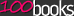
<style>
.page{position:relative;width:74px;height:16px;background:#333333}
.page>*{position:absolute;margin:0}
.t1{font:17.3px "SegoeScript";letter-spacing:-0.1em;color:#ff006c}
.t2{font:21.6px "Anivers-Regular";letter-spacing:-0.1em;color:#ffffff}
</style>
<div class="page">
<p class="t1" style="left:0px;top:0px;width:33px;height:13px">100</p>
<p class="t2" style="left:33px;top:0px;width:41px;height:16px">books</p>
</div>
